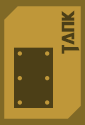
<style>
.page{position:relative;width:85px;height:125px;background:#bf9739}
.page>*{position:absolute;margin:0}
.t1{font:20px "TransformersMovie";color:#4c3f17}
</style>
<div class="page">
<p class="t1" style="left:61px;top:10px;width:19px;height:44px;rotate:-90deg">tank</p>
</div>
